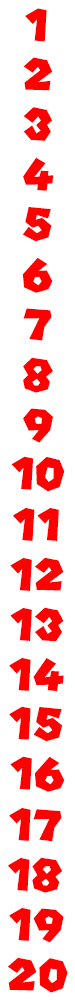
<style>
.page{position:relative;width:75px;height:1000px;background:#ffffff}
.page>*{position:absolute;margin:0}
.t1{font:60px "SuperMario";color:#ff0000}
</style>
<div class="page">
<p class="t1" style="left:25px;top:8px;width:22px;height:34px">1</p>
<p class="t1" style="left:23px;top:57px;width:30px;height:34px">2</p>
<p class="t1" style="left:23px;top:107px;width:30px;height:34px">3</p>
<p class="t1" style="left:23px;top:157px;width:31px;height:34px">4</p>
<p class="t1" style="left:22px;top:207px;width:30px;height:35px">5</p>
<p class="t1" style="left:22px;top:257px;width:31px;height:36px">6</p>
<p class="t1" style="left:23px;top:308px;width:29px;height:33px">7</p>
<p class="t1" style="left:23px;top:357px;width:30px;height:36px">8</p>
<p class="t1" style="left:23px;top:408px;width:30px;height:35px">9</p>
<p class="t1" style="left:11px;top:456px;width:54px;height:36px">10</p>
<p class="t1" style="left:13px;top:508px;width:46px;height:33px">11</p>
<p class="t1" style="left:10px;top:557px;width:54px;height:34px">12</p>
<p class="t1" style="left:10px;top:607px;width:54px;height:35px">13</p>
<p class="t1" style="left:9px;top:658px;width:55px;height:33px">14</p>
<p class="t1" style="left:9px;top:706px;width:54px;height:36px">15</p>
<p class="t1" style="left:10px;top:756px;width:55px;height:36px">16</p>
<p class="t1" style="left:9px;top:808px;width:53px;height:34px">17</p>
<p class="t1" style="left:8px;top:857px;width:55px;height:36px">18</p>
<p class="t1" style="left:9px;top:908px;width:55px;height:35px">19</p>
<p class="t1" style="left:7px;top:957px;width:61px;height:36px">20</p>
</div>
